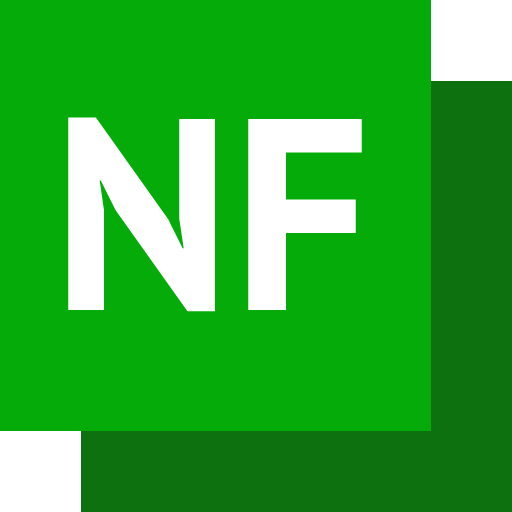
<style>
.page{position:relative;width:512px;height:512px;background:#05ac09}
.page>*{position:absolute;margin:0}
.t1{font:273px "PTSans-Bold";color:#ffffff}
</style>
<div class="page">
<p class="t1" style="left:68px;top:117px;width:294px;height:195px">NF</p>
</div>
